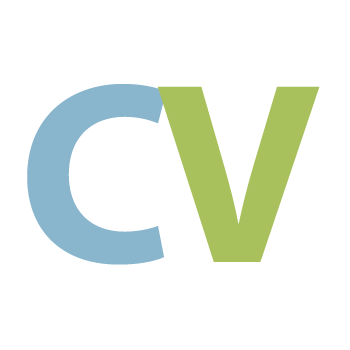
<style>
.page{position:relative;width:350px;height:350px;background:#ffffff}
.page>*{position:absolute;margin:0}
.t1{font:260px "MyriadPro-Bold";letter-spacing:-0.075em;color:#89b5cd}
.t2{font:260px "MyriadPro-Bold";letter-spacing:-0.075em;color:#a8c15c}
</style>
<div class="page">
<p class="t1" style="left:27px;top:84px;width:293px;height:181px">C<span class="t2">V</span></p>
</div>
